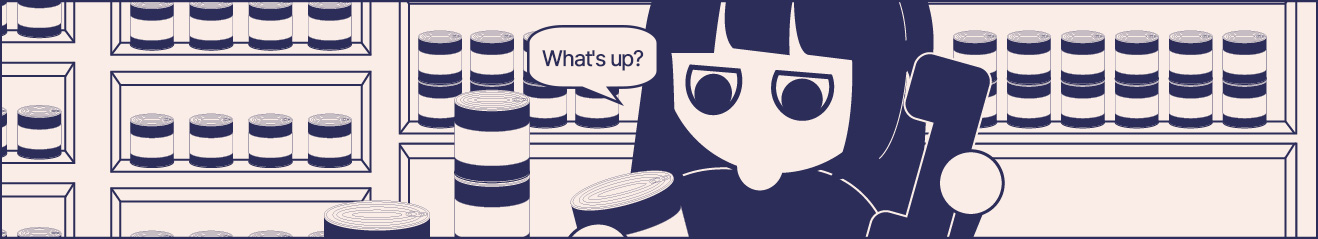
<style>
.page{position:relative;width:1318px;height:239px;background:#faede7}
.page>*{position:absolute;margin:0}
.t1{font:22.2px "Pretendard-Regular";letter-spacing:-0.05em;color:#2c2d59;font-weight:bold}
</style>
<div class="page">
<p class="t1" style="left:542px;top:50px;width:102px;height:21px">What's up?</p>
<p class="t1" style="left:542px;top:50px;width:102px;height:21px">What's up?</p>
</div>
